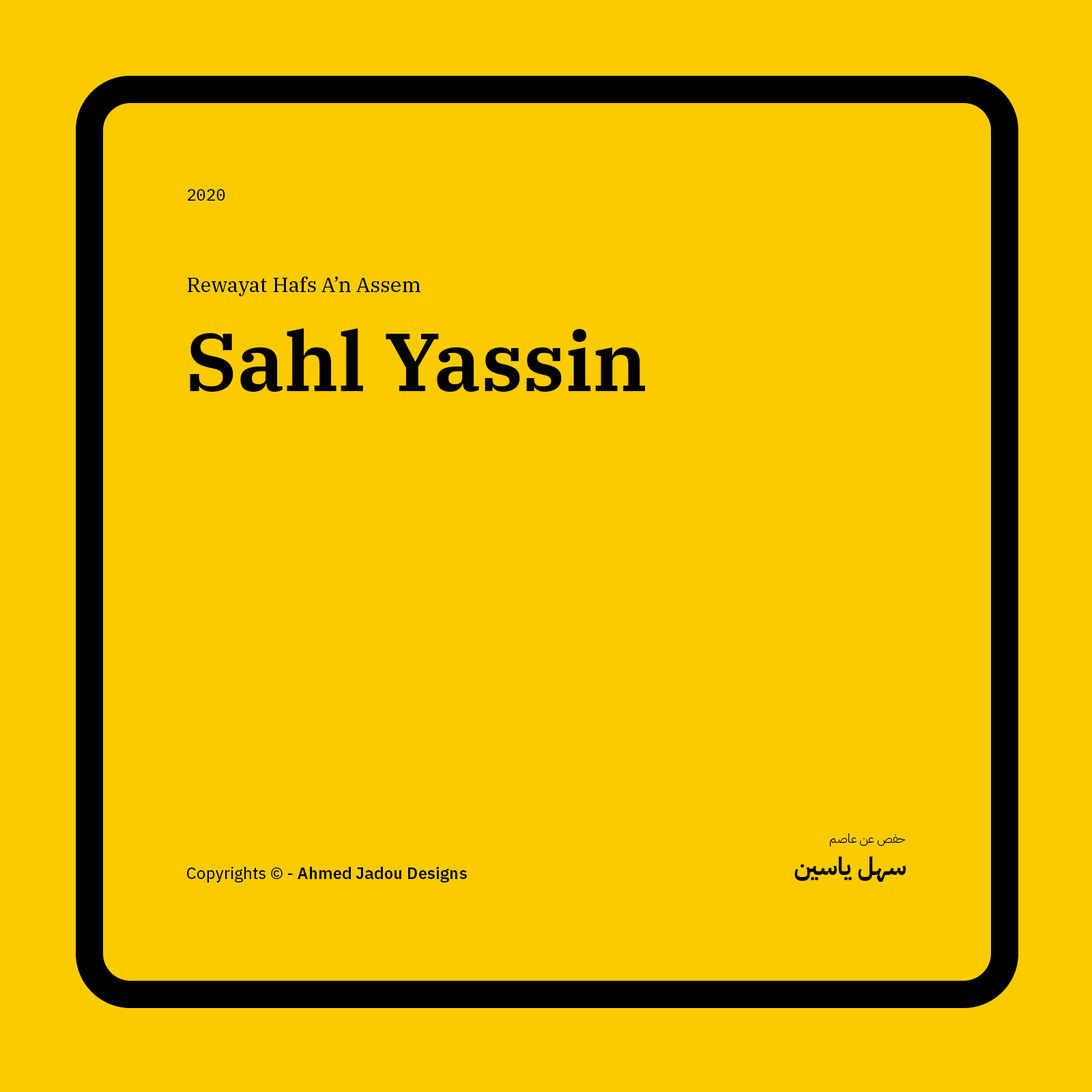
<style>
.page{position:relative;width:1092px;height:1092px;background:#facb00}
.page>*{position:absolute;margin:0}
.t1{font:16.4px "IBMPlexMono-Text";color:#000000}
.t2{font:20.5px "IBMPlexSerif-Text";color:#000000}
.t3{font:81.9px "IBMPlexSerif-SemiBold";color:#000000}
.t4{font:12.3px "IBMPlexArabic-Light";color:#000000}
.t5{font:24.6px "IBMPlexArabic-Bold";color:#000000}
.t6{font:16.4px "IBMPlexSans-SemiBold";color:#000000}
.t7{font:16.4px "IBMPlexSans-Text";color:#000000}
</style>
<div class="page">
<p class="t1" style="left:188px;top:189px;width:37px;height:12px">2020</p>
<p class="t2" style="left:187px;top:276px;width:233px;height:20px">Rewayat Hafs A’n Assem</p>
<p class="t3" style="left:190px;top:328px;width:456px;height:64px">Sahl Yassin</p>
<p class="t4" style="left:830px;top:833px;width:76px;height:14px">حفص عن عاصم</p>
<p class="t5" style="left:794px;top:857px;width:112px;height:25px">سهل ياسين</p>
<p class="t6" style="left:187px;top:867px;width:280px;height:15px"><span class="t7">Copyrights © - </span>Ahmed Jadou Designs</p>
</div>
